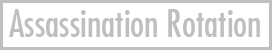
<style>
.page{position:relative;width:272px;height:50px;background:#ffffff}
.page>*{position:absolute;margin:0}
.t1{font:37.3px "FuturaCondensed";color:#bebfc1}
</style>
<div class="page">
<p class="t1" style="left:9px;top:9px;width:251px;height:28px">Assassination Rotation</p>
</div>
